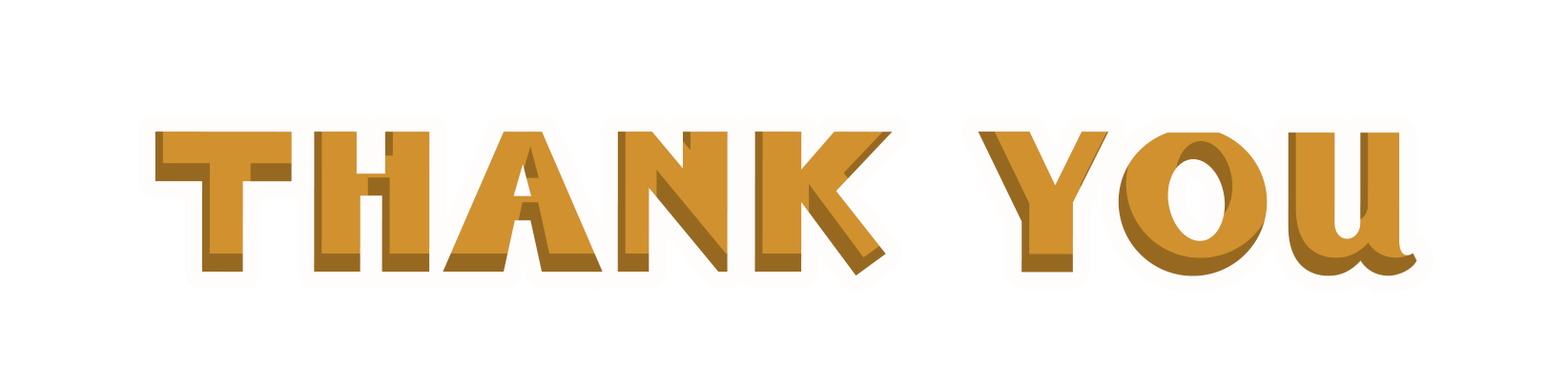
<style>
.page{position:relative;width:1568px;height:385px;background:#ffffff}
.page>*{position:absolute;margin:0}
.t1{font:194.6px "BadTyp-Regular";color:#d0912e}
</style>
<div class="page">
<p class="t1" style="left:155px;top:132px;width:1262px;height:145px">Thank you</p>
</div>
